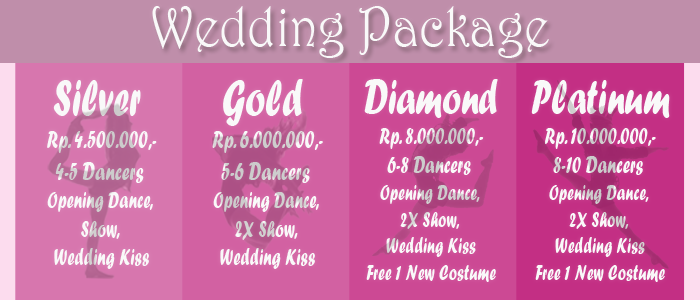
<style>
.page{position:relative;width:700px;height:300px}
.page>*{position:absolute;margin:0}
.t1{font:57.4px "Harrington";color:#f9f9f9;scale:0.89 1}
.t2{font:23.8px "ForteMT";color:#f9f9f9;scale:0.69 1}
.t3{font:53.2px "ForteMT";color:#f9f9f9;scale:0.69 1}
.t4{font:26.5px "ForteMT";color:#f9f9f9;scale:0.69 1}
.t5{font:23.8px "ForteMT";scale:0.69 1}
.t6{font:53.2px "ForteMT";scale:0.69 1}
.t7{font:26.5px "ForteMT";scale:0.69 1}
.t8{font:22.2px "ForteMT";color:#f9f9f9;scale:0.7 1}
.t9{font:49.6px "ForteMT";color:#f9f9f9;scale:0.7 1}
.t10{font:24.7px "ForteMT";color:#f9f9f9;scale:0.7 1}
</style>
<div class="page">
<p class="t1" style="left:152px;top:6px;width:397px;height:52px">Wedding Package</p>
<p class="t2" style="left:47px;top:80px;width:110px;height:189px;text-align:center"><span class="t3">Silver <br></span><span class="t4">Rp. 4.500.000,-<br>4-5 Dancers</span> <br>Opening Dance, <br>Show, <br>Wedding Kiss</p>
<p class="t5" style="left:212px;top:79px;width:111px;height:190px;text-align:center"><span class="t6">Gold <br></span><span class="t7">Rp. 6.000.000,-<br>5-6 Dancers</span> <br>Opening Dance, <br>2X Show, <br>Wedding Kiss</p>
<p class="t8" style="left:364px;top:79px;width:134px;height:203px;text-align:center"><span class="t9">Diamond<br></span><span class="t10">Rp. 8.000.000,-<br>6-8 Dancers</span> <br>Opening Dance, <br>2X Show, <br>Wedding Kiss<br>Free 1 New Costume</p>
<p class="t8" style="left:531px;top:80px;width:139px;height:202px;text-align:center"><span class="t9">Platinum<br></span><span class="t10">Rp. 10.000.000,-<br>8-10 Dancers</span> <br>Opening Dance, <br>2X Show, <br>Wedding Kiss<br>Free 1 New Costume</p>
</div>
